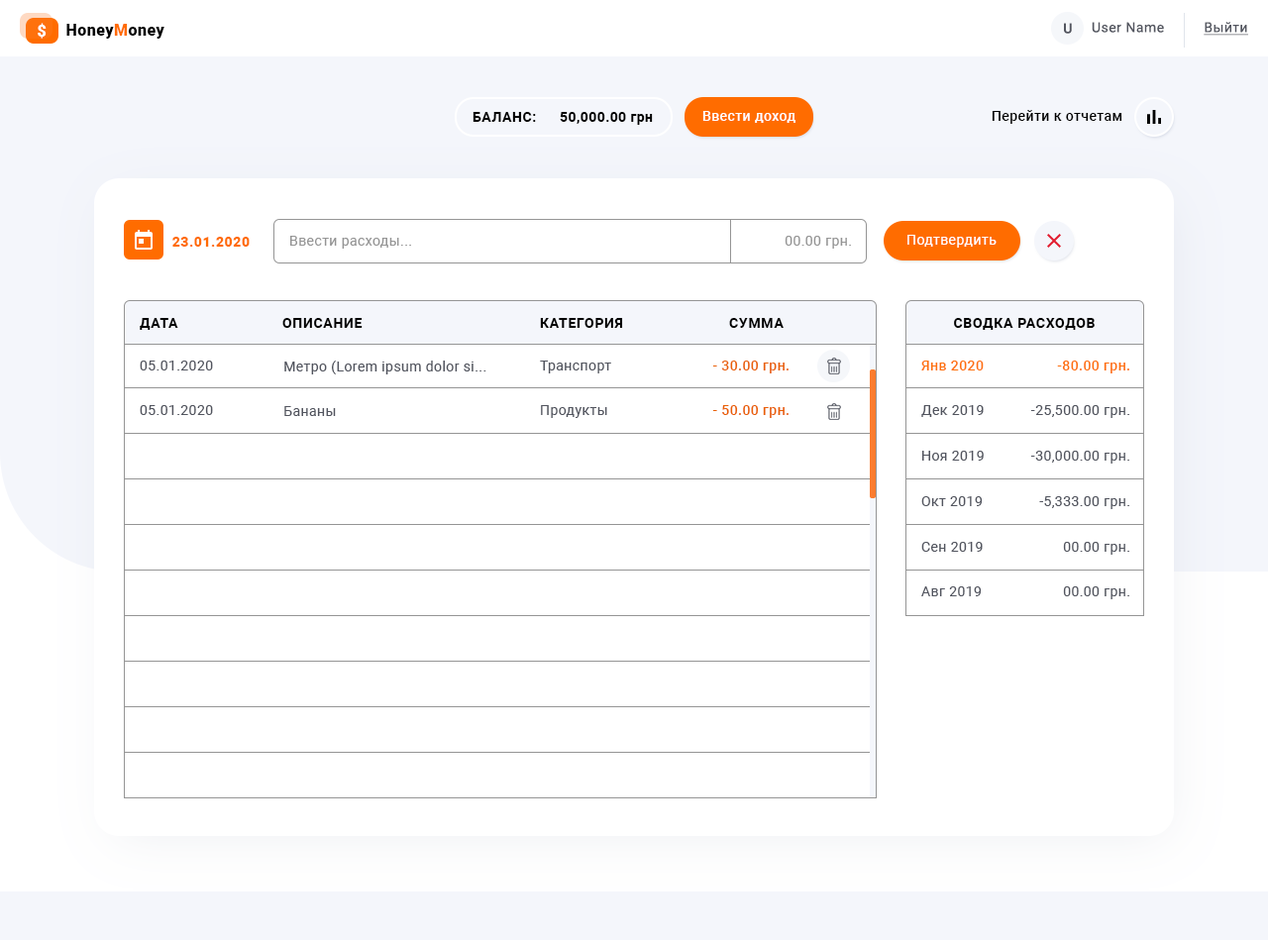
<style>
.page{position:relative;width:1268px;height:940px;background:#ffffff}
.page>*{position:absolute;margin:0}
.t1{font:15.9px "Roboto-Black";letter-spacing:0.03em;color:#ffffff}
.t2{font:15.9px "Roboto-Black";letter-spacing:0.03em;color:#000000}
.t3{font:15.9px "Roboto-Black";letter-spacing:0.03em;color:#ff6c00}
.t4{font:13.9px "Roboto-Medium";letter-spacing:0.035em;color:#52555f}
.t5{font:13.9px "Roboto-Regular";letter-spacing:0.035em;color:#52555f}
.t6{font:13.9px "Roboto-Regular";letter-spacing:0.03em;color:#52555f;text-decoration:underline}
.t7{font:13.9px "Roboto-Bold";letter-spacing:0.04em;color:#000000;text-transform:uppercase}
.t8{font:13.9px "Roboto-Bold";letter-spacing:0.03em;color:#000000}
.t9{font:13.9px "Roboto-Medium";letter-spacing:0.03em;color:#ffffff}
.t10{font:13.9px "Roboto-Medium";letter-spacing:0.03em;color:#000000}
.t11{font:13.9px "Roboto-Black";letter-spacing:0.04em;color:#ff6c00}
.t12{font:13.9px "Roboto-Regular";letter-spacing:0.03em;color:#959595}
.t13{font:13.9px "Roboto-Regular";letter-spacing:0.03em;color:#ffffff}
.t14{font:13.9px "Roboto-Bold";letter-spacing:0.05em;color:#000000;text-transform:uppercase}
.t15{font:13.9px "Roboto-Regular";letter-spacing:0.03em;color:#52555f}
.t16{font:13.9px "Roboto-Medium";letter-spacing:0.03em;color:#e96105}
.t17{font:13.9px "Roboto-Medium";letter-spacing:0.03em;color:#fe710d}
</style>
<div class="page">
<p class="t1" style="left:38px;top:23px;width:9px;height:16px">$</p>
<p class="t2" style="left:66px;top:24px;width:98px;height:15px">Honey<span class="t3">M</span>oney</p>
<p class="t4" style="left:1064px;top:23px;width:8px;height:11px">U</p>
<p class="t5" style="left:1092px;top:22px;width:72px;height:11px">User Name</p>
<p class="t6" style="left:1204px;top:22px;width:44px;height:14px">Выйти</p>
<p class="t7" style="left:473px;top:112px;width:63px;height:10px">баланс:</p>
<p class="t8" style="left:560px;top:112px;width:93px;height:13px">50,000.00 грн</p>
<p class="t9" style="left:702px;top:111px;width:94px;height:12px">Ввести доход</p>
<p class="t10" style="left:992px;top:110px;width:131px;height:14px">Перейти к отчетам</p>
<p class="t11" style="left:172px;top:237px;width:78px;height:10px">23.01.2020</p>
<p class="t12" style="left:290px;top:236px;width:121px;height:13px">Ввести расходы...</p>
<p class="t12" style="left:785px;top:236px;width:66px;height:13px">00.00 грн.</p>
<p class="t13" style="left:908px;top:235px;width:89px;height:13px">Подтвердить</p>
<p class="t14" style="left:140px;top:318px;width:38px;height:12px">Дата</p>
<p class="t14" style="left:282px;top:318px;width:81px;height:10px">Описание</p>
<p class="t14" style="left:540px;top:318px;width:83px;height:10px">Категория</p>
<p class="t14" style="left:729px;top:318px;width:55px;height:10px">Сумма</p>
<p class="t14" style="left:954px;top:318px;width:141px;height:12px">Сводка расходов</p>
<p class="t15" style="left:140px;top:361px;width:73px;height:10px">05.01.2020</p>
<p class="t15" style="left:284px;top:361px;width:202px;height:14px">Метро (Lorem ipsum dolor si...</p>
<p class="t15" style="left:540px;top:361px;width:71px;height:13px">Транспорт</p>
<p class="t16" style="left:712px;top:361px;width:77px;height:13px">- 30.00 грн.</p>
<p class="t17" style="left:921px;top:361px;width:63px;height:10px">Янв 2020</p>
<p class="t17" style="left:1057px;top:361px;width:72px;height:13px">-80.00 грн.</p>
<p class="t15" style="left:140px;top:405px;width:73px;height:10px">05.01.2020</p>
<p class="t15" style="left:284px;top:406px;width:52px;height:10px">Бананы</p>
<p class="t15" style="left:541px;top:405px;width:66px;height:13px">Продукты</p>
<p class="t16" style="left:712px;top:405px;width:77px;height:13px">- 50.00 грн.</p>
<p class="t15" style="left:921px;top:405px;width:63px;height:12px">Дек 2019</p>
<p class="t15" style="left:1030px;top:405px;width:99px;height:13px">-25,500.00 грн.</p>
<p class="t15" style="left:922px;top:451px;width:62px;height:10px">Ноя 2019</p>
<p class="t15" style="left:1030px;top:451px;width:99px;height:13px">-30,000.00 грн.</p>
<p class="t15" style="left:921px;top:496px;width:62px;height:10px">Окт 2019</p>
<p class="t15" style="left:1039px;top:496px;width:90px;height:13px">-5,333.00 грн.</p>
<p class="t15" style="left:921px;top:542px;width:62px;height:10px">Сен 2019</p>
<p class="t15" style="left:1063px;top:542px;width:66px;height:13px">00.00 грн.</p>
<p class="t15" style="left:921px;top:587px;width:61px;height:9px">Авг 2019</p>
<p class="t15" style="left:1063px;top:587px;width:66px;height:12px">00.00 грн.</p>
</div>
